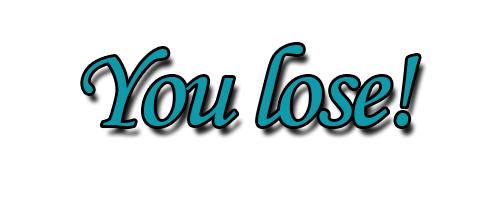
<style>
.page{position:relative;width:500px;height:200px;background:#ffffff}
.page>*{position:absolute;margin:0}
.t1{font:117.1px "MonotypeCorsiva";letter-spacing:-0.04em;color:#0d9bac}
</style>
<div class="page">
<p class="t1" style="left:83px;top:45px;width:336px;height:81px">You lose!</p>
</div>
